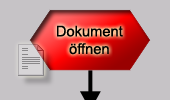
<style>
.page{position:relative;width:170px;height:100px;background:#c6c3c6}
.page>*{position:absolute;margin:0}
.t1{font:14.7px "ArialMT";color:#000000}
</style>
<div class="page">
<p class="t1" style="left:57px;top:25px;width:66px;height:30px;text-align:center">Dokument<br>öffnen</p>
</div>
